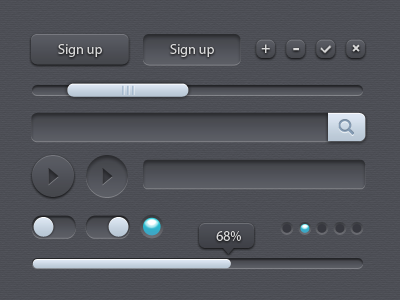
<style>
.page{position:relative;width:400px;height:300px}
.page>*{position:absolute;margin:0}
.t1{font:14px "MyriadPro-Regular";color:#d8d8d8}
.t2{font:16px "MyriadPro-Bold";color:#d8d8d8}
.t3{font:22px "MyriadPro-Bold";color:#d8d8d8}
</style>
<div class="page">
<p class="t1" style="left:58px;top:44px;width:44px;height:13px">Sign up</p>
<p class="t1" style="left:170px;top:44px;width:44px;height:13px">Sign up</p>
<p class="t2" style="left:261px;top:44px;width:9px;height:9px">+</p>
<p class="t3" style="left:293px;top:48px;width:6px;height:3px">-</p>
<p class="t1" style="left:216px;top:231px;width:25px;height:10px">68%</p>
</div>
